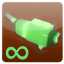
<style>
.page{position:relative;width:64px;height:64px}
.page>*{position:absolute;margin:0}
.t1{font:37px "SourceCodeVariable-Roman";color:#6be077}
</style>
<div class="page">
<p class="t1" style="left:5px;top:46px;width:24px;height:14px">∞</p>
</div>
